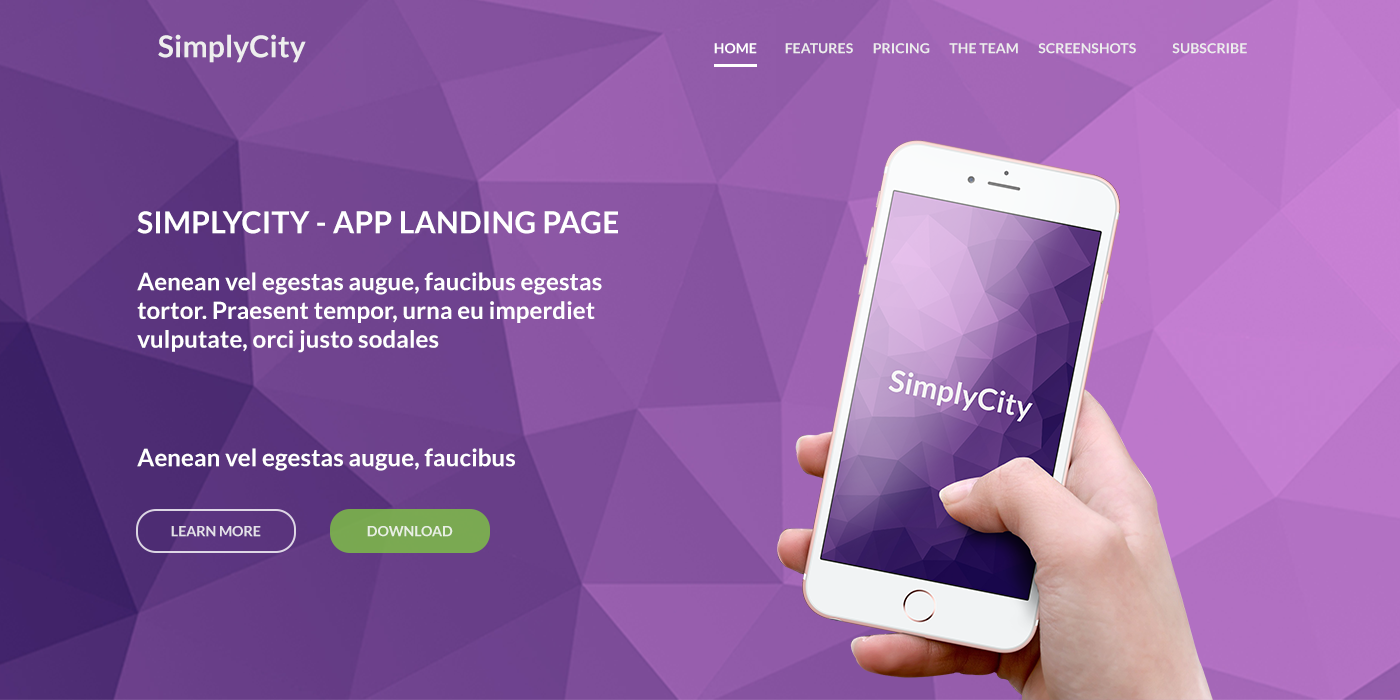
<style>
.page{position:relative;width:1400px;height:700px}
.page>*{position:absolute;margin:0}
.t1{font:30px "Lato-Bold";letter-spacing:0.005em;color:#eeeeee}
.t2{font:14px "Lato-Bold";letter-spacing:0.005em;color:#ededed}
.t3{font:14px "Lato-Bold";letter-spacing:0.005em;color:#ffffff}
.t4{font:30px "Lato-Bold";letter-spacing:0.01em;color:#ffffff}
.t5{font:24px "Lato-Bold";letter-spacing:0.005em;color:#ffffff}
.t6{font:14px "Lato-Bold";color:#e4e1e9}
.t7{font:14px "Lato-Bold";color:#e8efe3}
</style>
<div class="page">
<p class="t1" style="left:158px;top:34px;width:148px;height:29px">SimplyCity</p>
<p class="t2" style="left:714px;top:43px;width:533px;height:11px"><span class="t3">HOME</span>          FEATURES       PRICING       THE TEAM       SCREENSHOTS             SUBSCRIBE</p>
<p class="t4" style="left:137px;top:211px;width:481px;height:23px">SIMPLYCITY - APP LANDING PAGE</p>
<p class="t5" style="left:137px;top:272px;width:465px;height:81px">Aenean vel egestas augue, faucibus egestas<br>tortor. Praesent tempor, urna eu imperdiet<br>vulputate, orci justo sodales</p>
<p class="t5" style="left:137px;top:448px;width:378px;height:23px">Aenean vel egestas augue, faucibus</p>
<p class="t6" style="left:171px;top:526px;width:90px;height:11px">LEARN MORE</p>
<p class="t7" style="left:367px;top:526px;width:86px;height:11px">DOWNLOAD</p>
</div>
